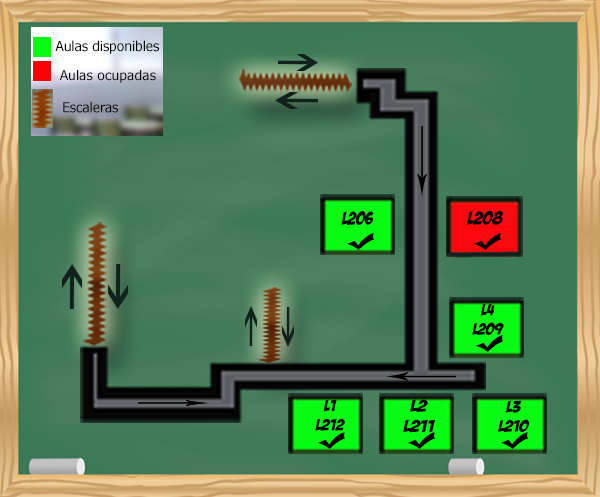
<style>
.page{position:relative;width:600px;height:497px}
.page>*{position:absolute;margin:0}
.t1{font:13.8px "Tahoma";color:#000300}
.t2{font:13.2px "Tahoma";color:#000300;scale:1.07 1}
.t3{font:18px "BadaBoomBB";color:#0a0700}
.t4{font:18px "BadaBoomBB";color:#0a0700;scale:1.08 1}
.t5{font:16px "BadaBoomBB";color:#080001;scale:1.06 1}
.t6{font:16px "BadaBoomBB";color:#000000;scale:1.12 1}
.t7{font:16.8px "BadaBoomBB";color:#000000;scale:1.24 1}
.t8{font:16px "BadaBoomBB";color:#080001;scale:1.15 1}
</style>
<div class="page">
<p class="t1" style="left:55px;top:40px;width:104px;height:14px">Aulas disponibles</p>
<p class="t2" style="left:59px;top:70px;width:97px;height:13px">Aulas ocupadas</p>
<p class="t1" style="left:63px;top:101px;width:55px;height:12px">Escaleras</p>
<p class="t3" style="left:341px;top:211px;width:33px;height:14px">L206</p>
<p class="t4" style="left:467px;top:210px;width:36px;height:15px">L208</p>
<p class="t5" style="left:472px;top:303px;width:32px;height:32px;text-align:center">L4<br>L209</p>
<p class="t6" style="left:315px;top:399px;width:30px;height:32px;text-align:center">L1<br>L212</p>
<p class="t7" style="left:403px;top:399px;width:33px;height:34px;text-align:center">L2<br>L211</p>
<p class="t8" style="left:498px;top:400px;width:31px;height:32px;text-align:center">L3<br>L210</p>
</div>
